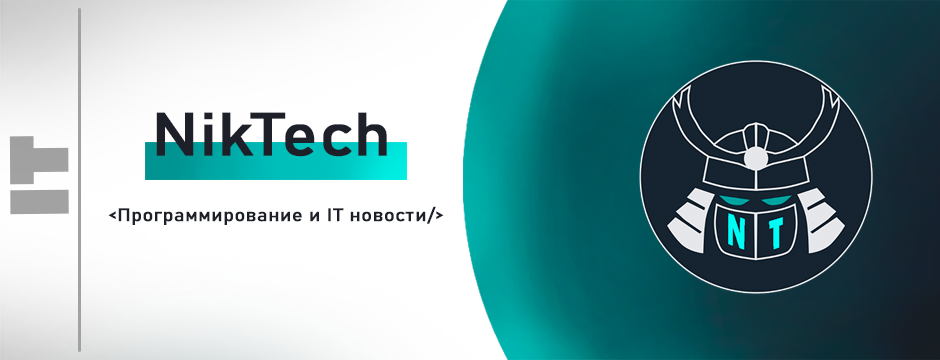
<style>
.page{position:relative;width:940px;height:360px}
.page>*{position:absolute;margin:0}
.t1{font:60px "Bahnschrift";color:#1d2029;font-weight:bold;scale:1.1 1}
.t2{font:78.2px "GillSans-UltraBoldCondensed";color:#a2a2a2;scale:1.36 1}
.t3{font:18px "Bahnschrift";color:#1d2029;font-weight:bold;scale:1.1 1}
</style>
<div class="page">
<p class="t1" style="left:156px;top:112px;width:231px;height:45px">NikTech</p>
<p class="t2" style="left:9px;top:136px;width:60px;height:79px;rotate:-90deg">IT</p>
<p class="t3" style="left:108px;top:206px;width:336px;height:19px">&lt;Программирование и IT новости/&gt;</p>
</div>
